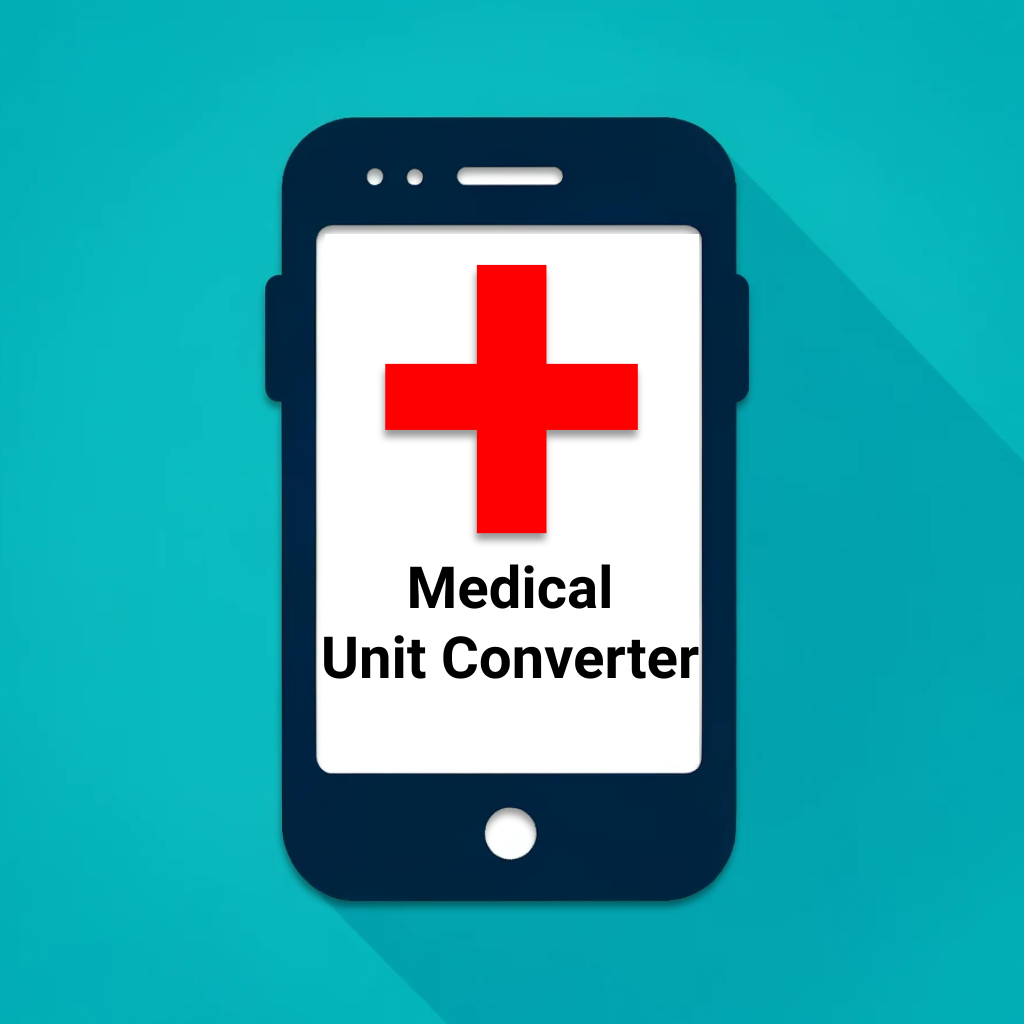
<style>
.page{position:relative;width:1024px;height:1024px}
.page>*{position:absolute;margin:0}
.t1{font:518.3px "SFProDisplay-Bold";color:#ff0000}
.t2{font:58px "SFProDisplay-Bold";color:#000000}
</style>
<div class="page">
<p class="t1" style="left:385px;top:264px;width:253px;height:270px">+</p>
<p class="t2" style="left:324px;top:564px;width:375px;height:115px;text-align:center">Medical<br>Unit Converter</p>
</div>
